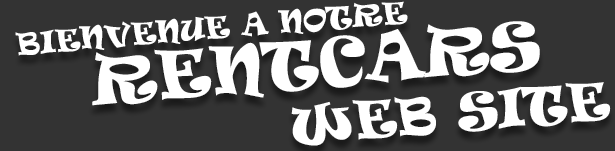
<style>
.page{position:relative;width:615px;height:151px;background:#333333}
.page>*{position:absolute;margin:0}
.t1{font:29px/59px "Ravie";color:#ffffff;text-transform:uppercase}
.t2{font:32px/59px "Ravie";color:#ffffff;text-transform:uppercase}
.t3{font:63.3px/56px "Ravie";color:#ffffff;text-transform:uppercase}
.t4{font:50px/56px "Ravie";color:#ffffff;text-transform:uppercase}
</style>
<div class="page">
<p class="t1" style="left:15px;top:1px;width:596px;height:145px;text-align:center;rotate:-5deg"><span class="t2">   </span>Bienvenue a notre                   <span class="t3"><br> RENTCARS<br>                 </span><span class="t4">web site</span></p>
</div>
